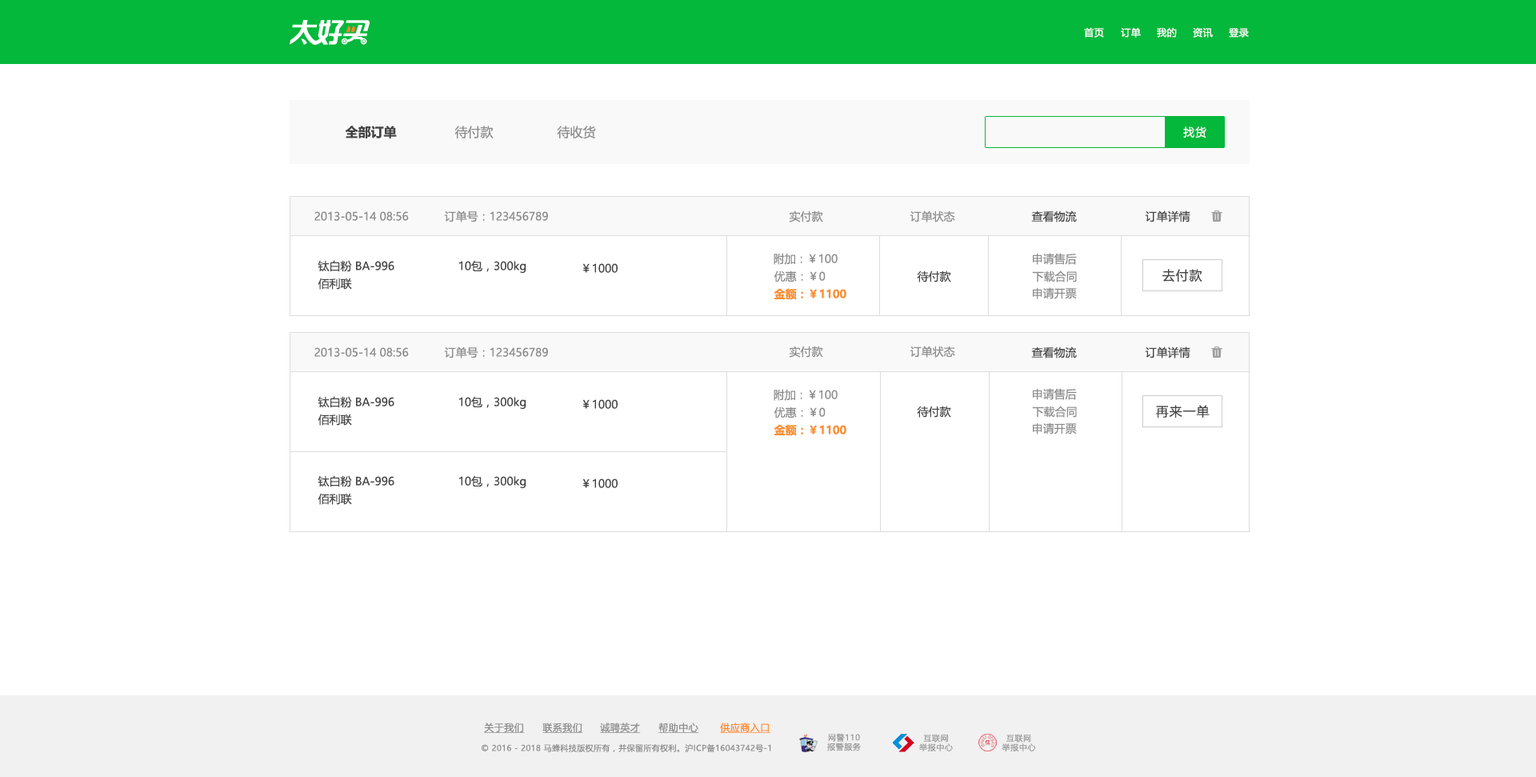
<style>
.page{position:relative;width:1536px;height:777px;background:#ffffff}
.page>*{position:absolute;margin:0}
.t1{font:9.6px "MicrosoftYaHeiUI";letter-spacing:0.04em;color:#ffffff}
.t2{font:12.8px "MicrosoftYaHeiUI-Bold";color:#444444}
.t3{font:12.8px "MicrosoftYaHeiUI";color:#8c8c8c}
.t4{font:11.2px "MicrosoftYaHeiUI";letter-spacing:0.06em;color:#f7f7f7}
.t5{font:11.2px "MicrosoftYaHeiUI";color:#8c8c8c}
.t6{font:11.2px "MicrosoftYaHeiUI";color:#444444}
.t7{font:12.8px "MicrosoftYaHeiUI";letter-spacing:0.06em;color:#444444}
.t8{font:11.2px "MicrosoftYaHeiUI-Bold";color:#fa8f2e}
.t9{font:9.6px "MicrosoftYaHeiUI";letter-spacing:0.04em;color:#8c8c8c;text-decoration:underline}
.t10{font:9.6px "MicrosoftYaHeiUI";letter-spacing:0.04em;color:#ff8b25;text-decoration:underline}
.t11{font:8px/9.3px "MicrosoftYaHei";letter-spacing:0.06em;color:#999999}
.t12{font:8px "MicrosoftYaHeiUI";letter-spacing:0.04em;color:#8c8c8c}
</style>
<div class="page">
<p class="t1" style="left:1084px;top:27px;width:20px;height:11px">首页</p>
<p class="t1" style="left:1120px;top:27px;width:20px;height:11px">订单</p>
<p class="t1" style="left:1156px;top:27px;width:20px;height:11px">我的</p>
<p class="t1" style="left:1192px;top:27px;width:20px;height:11px">资讯</p>
<p class="t1" style="left:1228px;top:28px;width:20px;height:10px">登录</p>
<p class="t2" style="left:345px;top:126px;width:52px;height:12px">全部订单</p>
<p class="t3" style="left:454px;top:126px;width:39px;height:12px">待付款</p>
<p class="t3" style="left:557px;top:126px;width:39px;height:12px">待收货</p>
<p class="t4" style="left:1183px;top:126px;width:23px;height:12px">找货</p>
<p class="t5" style="left:314px;top:211px;width:95px;height:10px">2013-05-14 08:56</p>
<p class="t5" style="left:444px;top:210px;width:104px;height:12px">订单号：123456789</p>
<p class="t5" style="left:789px;top:210px;width:34px;height:12px">实付款</p>
<p class="t5" style="left:909px;top:210px;width:46px;height:12px">订单状态</p>
<p class="t6" style="left:1031px;top:210px;width:45px;height:12px">查看物流</p>
<p class="t6" style="left:1144px;top:210px;width:46px;height:12px">订单详情</p>
<p class="t5" style="left:773px;top:253px;width:64px;height:12px">附加：￥100</p>
<p class="t5" style="left:1032px;top:253px;width:44px;height:12px">申请售后</p>
<p class="t6" style="left:318px;top:260px;width:76px;height:12px">钛白粉 BA-996</p>
<p class="t6" style="left:459px;top:260px;width:67px;height:14px">10包，300kg</p>
<p class="t6" style="left:582px;top:263px;width:35px;height:10px">￥1000</p>
<p class="t7" style="left:1162px;top:269px;width:40px;height:13px">去付款</p>
<p class="t6" style="left:318px;top:278px;width:34px;height:12px">佰利联</p>
<p class="t5" style="left:773px;top:270px;width:52px;height:12px">优惠：￥0</p>
<p class="t6" style="left:917px;top:270px;width:34px;height:12px">待付款</p>
<p class="t5" style="left:1032px;top:270px;width:44px;height:12px">下载合同</p>
<p class="t8" style="left:773px;top:288px;width:73px;height:12px">金额：￥1100</p>
<p class="t5" style="left:1032px;top:287px;width:44px;height:12px">申请开票</p>
<p class="t5" style="left:314px;top:347px;width:95px;height:10px">2013-05-14 08:56</p>
<p class="t5" style="left:444px;top:346px;width:104px;height:12px">订单号：123456789</p>
<p class="t5" style="left:789px;top:345px;width:34px;height:12px">实付款</p>
<p class="t5" style="left:909px;top:345px;width:46px;height:12px">订单状态</p>
<p class="t6" style="left:1031px;top:346px;width:45px;height:12px">查看物流</p>
<p class="t6" style="left:1144px;top:346px;width:46px;height:12px">订单详情</p>
<p class="t5" style="left:773px;top:389px;width:64px;height:12px">附加：￥100</p>
<p class="t5" style="left:1032px;top:388px;width:44px;height:12px">申请售后</p>
<p class="t6" style="left:318px;top:396px;width:76px;height:12px">钛白粉 BA-996</p>
<p class="t6" style="left:459px;top:396px;width:67px;height:13px">10包，300kg</p>
<p class="t6" style="left:582px;top:399px;width:35px;height:10px">￥1000</p>
<p class="t6" style="left:318px;top:413px;width:34px;height:12px">佰利联</p>
<p class="t5" style="left:773px;top:406px;width:52px;height:12px">优惠：￥0</p>
<p class="t6" style="left:917px;top:405px;width:34px;height:12px">待付款</p>
<p class="t5" style="left:1032px;top:405px;width:44px;height:12px">下载合同</p>
<p class="t7" style="left:1156px;top:405px;width:53px;height:12px">再来一单</p>
<p class="t8" style="left:773px;top:424px;width:73px;height:12px">金额：￥1100</p>
<p class="t5" style="left:1032px;top:422px;width:44px;height:12px">申请开票</p>
<p class="t6" style="left:318px;top:475px;width:76px;height:12px">钛白粉 BA-996</p>
<p class="t6" style="left:459px;top:475px;width:67px;height:14px">10包，300kg</p>
<p class="t6" style="left:582px;top:478px;width:35px;height:10px">￥1000</p>
<p class="t6" style="left:318px;top:493px;width:34px;height:12px">佰利联</p>
<p class="t9" style="left:484px;top:722px;width:41px;height:11px">关于我们</p>
<p class="t9" style="left:542px;top:722px;width:41px;height:11px">联系我们</p>
<p class="t9" style="left:600px;top:722px;width:41px;height:11px">诚聘英才</p>
<p class="t9" style="left:658px;top:722px;width:41px;height:11px">帮助中心</p>
<p class="t10" style="left:720px;top:722px;width:50px;height:11px">供应商入口</p>
<p class="t11" style="left:827px;top:733px;width:34px;height:18px;text-align:center">网警110<br>报警服务</p>
<p class="t11" style="left:919px;top:733px;width:34px;height:18px;text-align:center">互联网<br>举报中心</p>
<p class="t11" style="left:1001px;top:733px;width:35px;height:18px;text-align:center">互联网<br>举报中心</p>
<p class="t12" style="left:481px;top:743px;width:290px;height:9px">© 2016 - 2018 马蜂科技版权所有，并保留所有权利。沪ICP备16043742号-1</p>
</div>
